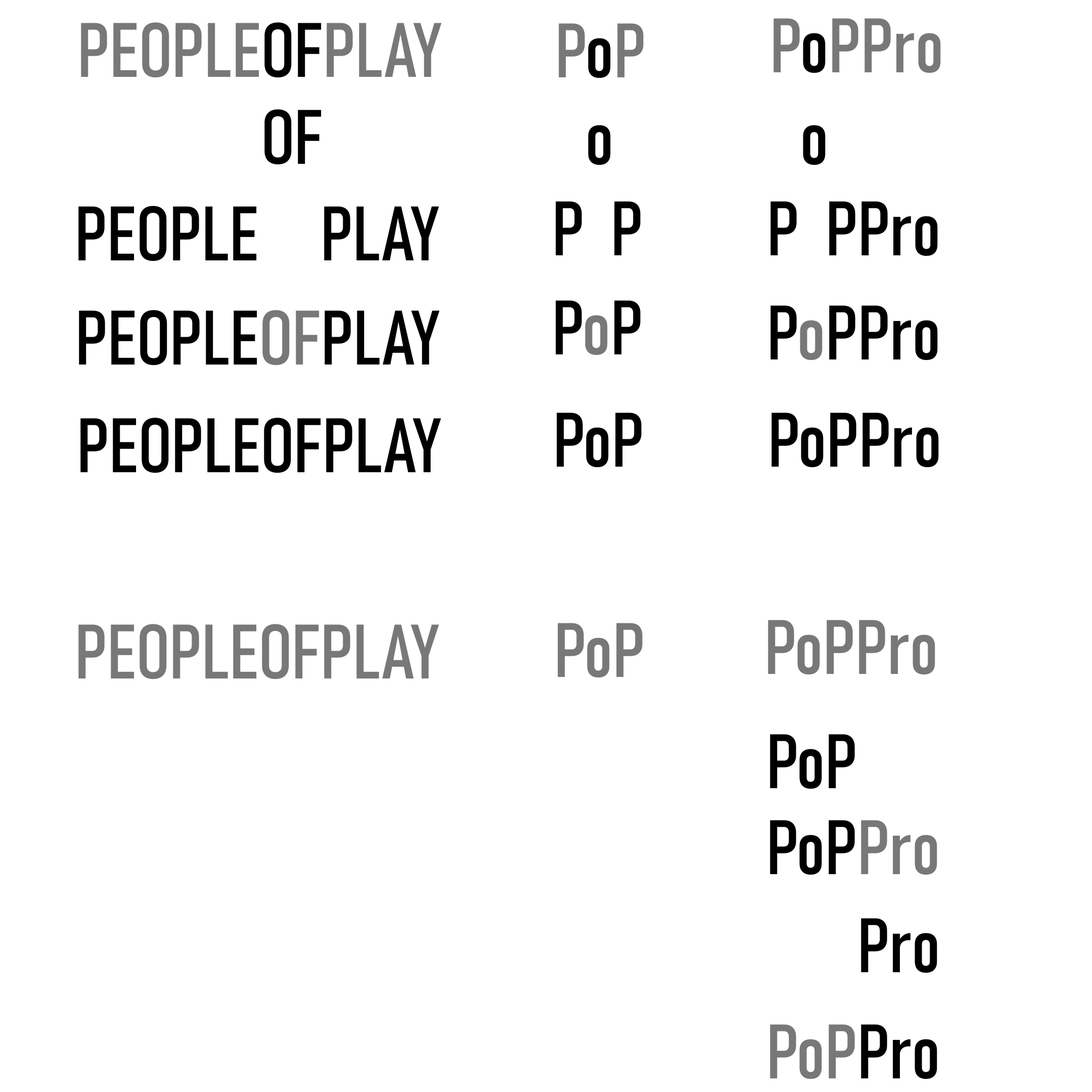
<style>
.page{position:relative;width:1092px;height:1092px;background:#ffffff}
.page>*{position:absolute;margin:0}
.t1{font:75.8px "Bahnschrift-Condensed";color:#787878}
.t2{font:75.8px "Bahnschrift-Condensed";color:#000000}
.t3{font:75.8px "Bahnschrift-Condensed";color:#ffffff}
.t4{font:75.8px "Bahnschrift-Condensed";color:#010000}
</style>
<div class="page">
<p class="t1" style="left:81px;top:22px;width:361px;height:56px">PEOPLE<span class="t2">OF</span>PLAY</p>
<p class="t1" style="left:559px;top:23px;width:85px;height:55px">P<span class="t2">o</span>P</p>
<p class="t1" style="left:773px;top:18px;width:168px;height:55px">P<span class="t2">o</span>PPro</p>
<p class="t3" style="left:559px;top:110px;width:85px;height:55px">P<span class="t2">o</span>P</p>
<p class="t2" style="left:78px;top:206px;width:361px;height:55px">PEOPLE<span class="t3">OF</span><span class="t4">PLAY</span></p>
<p class="t2" style="left:556px;top:201px;width:85px;height:55px">P<span class="t3">o</span>P</p>
<p class="t2" style="left:770px;top:201px;width:168px;height:55px">P<span class="t3">o</span>PPro</p>
<p class="t2" style="left:556px;top:300px;width:85px;height:55px">P<span class="t1">o</span>P</p>
<p class="t2" style="left:770px;top:305px;width:168px;height:55px">P<span class="t1">o</span>PPro</p>
<p class="t2" style="left:79px;top:310px;width:361px;height:56px">PEOPLE<span class="t1">OF</span>PLAY</p>
<p class="t2" style="left:557px;top:413px;width:85px;height:55px">PoP</p>
<p class="t2" style="left:771px;top:413px;width:168px;height:55px">PoPPro</p>
<p class="t2" style="left:80px;top:418px;width:361px;height:55px">PEOPLEOFPLAY</p>
<p class="t1" style="left:78px;top:624px;width:361px;height:55px">PEOPLEOFPLAY</p>
<p class="t1" style="left:558px;top:623px;width:85px;height:55px">PoP</p>
<p class="t1" style="left:768px;top:620px;width:167px;height:55px">PoPPro</p>
<p class="t2" style="left:770px;top:734px;width:167px;height:55px">PoP<span class="t3">Pro</span></p>
<p class="t2" style="left:770px;top:820px;width:167px;height:55px">PoP<span class="t1">Pro</span></p>
<p class="t3" style="left:770px;top:918px;width:167px;height:55px">PoP<span class="t2">Pro</span></p>
<p class="t1" style="left:770px;top:1024px;width:167px;height:55px">PoP<span class="t2">Pro</span></p>
</div>
